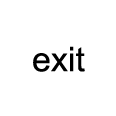
<style>
.page{position:relative;width:116px;height:116px;background:#ffffff}
.page>*{position:absolute;margin:0}
.t1{font:34px "ArialMT";color:#000000}
</style>
<div class="page">
<p class="t1" style="left:33px;top:46px;width:52px;height:26px">exit</p>
</div>
